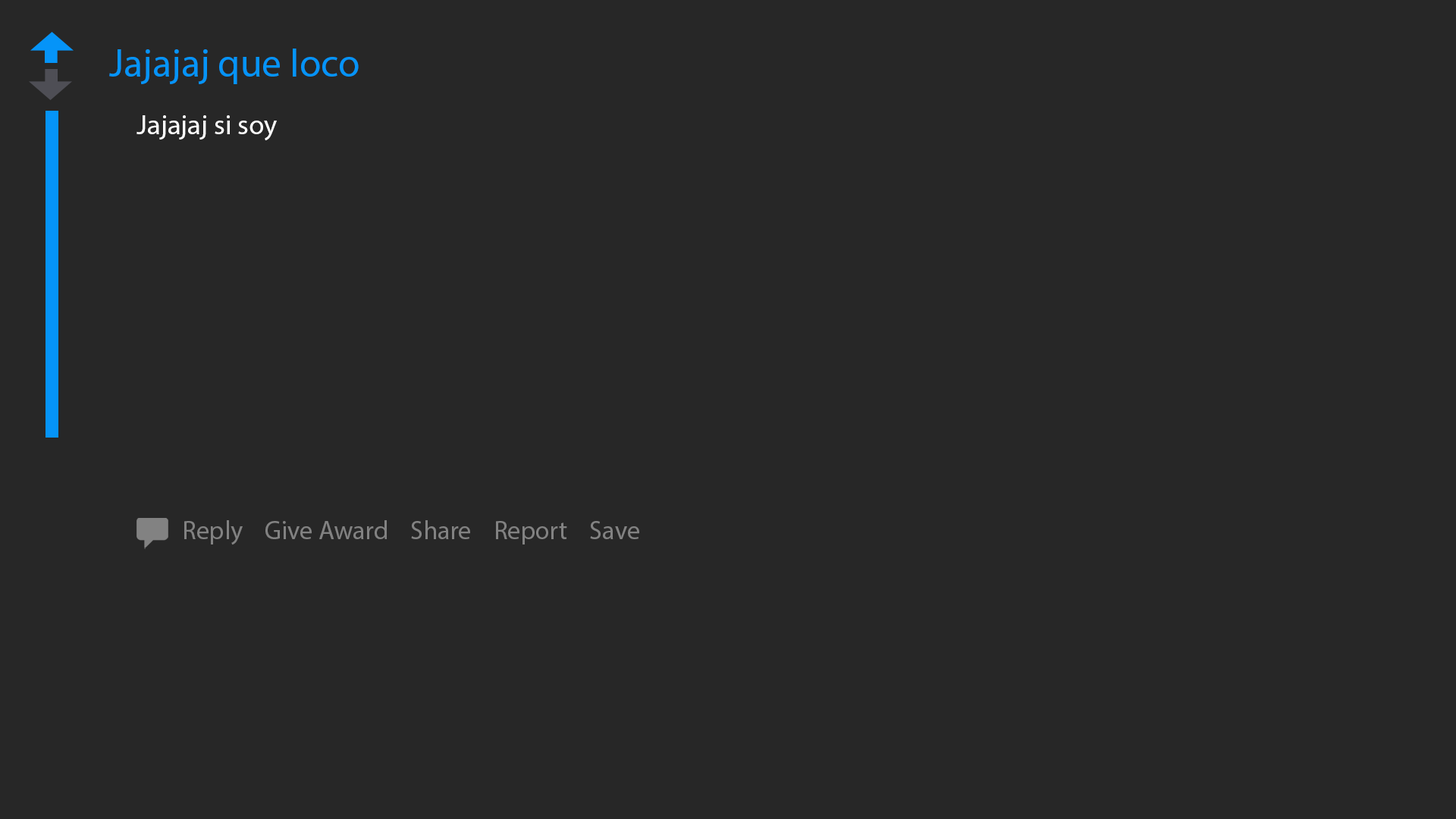
<style>
.page{position:relative;width:1456px;height:819px;background:#272727}
.page>*{position:absolute;margin:0}
.t1{font:39.4px "MyriadPro-Regular";color:#0594f8}
.t2{font:28.1px "MyriadPro-Regular";color:#ffffff}
.t3{font:26px "MyriadPro-Regular";color:#828282}
</style>
<div class="page">
<p class="t1" style="left:109px;top:49px;width:250px;height:35px">Jajajaj que loco</p>
<p class="t2" style="left:136px;top:115px;width:141px;height:25px">Jajajaj si soy</p>
<p class="t3" style="left:184px;top:520px;width:455px;height:25px">Reply    Give Award    Share    Report    Save</p>
</div>
